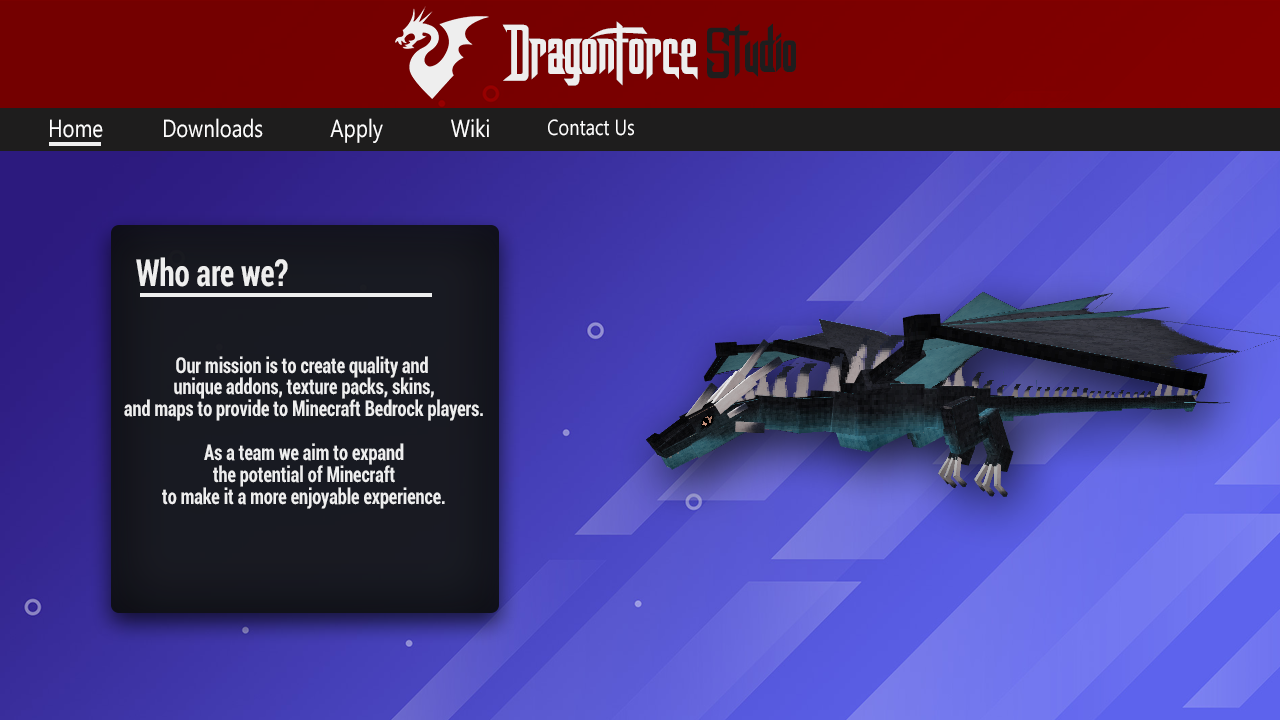
<style>
.page{position:relative;width:1280px;height:720px}
.page>*{position:absolute;margin:0}
.t1{font:70.3px "DragonForcE";color:#eeeeee;scale:0.84 1}
.t2{font:63.1px "DragonForcE";color:#1e1d1d;scale:0.84 1}
.t3{font:24.6px "SegoeUI";color:#fffefe;scale:0.83 1}
.t4{font:21.8px "SegoeUI";color:#fffefe;scale:0.83 1}
.t5{font:37.3px "Roboto-BoldCondensed";color:#eeeeee;scale:0.82 1}
.t6{font:21.8px "Roboto-BoldCondensed";color:#eeeeee;scale:0.83 1}
</style>
<div class="page">
<p class="t1" style="left:502px;top:21px;width:196px;height:65px">DragonForce</p>
<p class="t2" style="left:707px;top:23px;width:89px;height:56px">Studio</p>
<p class="t3" style="left:50px;top:119px;width:53px;height:19px">Home</p>
<p class="t3" style="left:164px;top:118px;width:99px;height:20px">Downloads</p>
<p class="t3" style="left:330px;top:118px;width:53px;height:25px">Apply</p>
<p class="t3" style="left:451px;top:118px;width:38px;height:19px">Wiki</p>
<p class="t4" style="left:548px;top:119px;width:86px;height:17px">Contact Us</p>
<p class="t5" style="left:136px;top:257px;width:152px;height:30px">Who are we?</p>
<p class="t6" style="left:124px;top:356px;width:359px;height:153px;text-align:center">Our mission is to create quality and <br>unique addons, texture packs, skins,<br>and maps to provide to Minecraft Bedrock players.<br><br>As a team we aim to expand<br>the potential of Minecraft<br>to make it a more enjoyable experience.</p>
</div>
